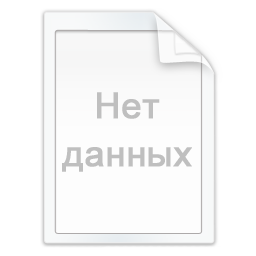
<style>
.page{position:relative;width:256px;height:256px;background:#ffffff}
.page>*{position:absolute;margin:0}
.t1{font:36px/48px "ArialMT";color:#bfbfbf;font-weight:bold}
</style>
<div class="page">
<p class="t1" style="left:62px;top:92px;width:130px;height:80px;text-align:center">Нет<br>данных</p>
</div>
